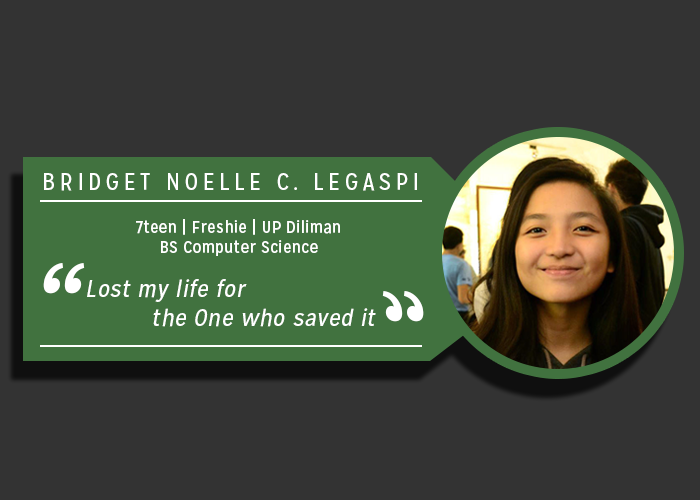
<style>
.page{position:relative;width:700px;height:500px;background:#333333}
.page>*{position:absolute;margin:0}
.t1{font:24.1px "MissionGothic-Regular";letter-spacing:0.18em;color:#ffffff;font-variant:small-caps}
.t2{font:17.2px "MissionGothic-Regular";letter-spacing:0.025em;color:#ffffff}
.t3{font:156.8px "MissionGothic-Regular";letter-spacing:0.025em;color:#ffffff;font-style:italic}
.t4{font:23.9px "MissionGothic-Regular";letter-spacing:0.025em;color:#ffffff;font-style:italic}
</style>
<div class="page">
<p class="t1" style="left:44px;top:173px;width:373px;height:18px">BRIDGET NOELLE C. LEGASPI</p>
<p class="t2" style="left:136px;top:219px;width:204px;height:37px;text-align:center">7teen | Freshie | UP Diliman<br>BS Computer Science</p>
<p class="t3" style="left:43px;top:263px;width:42px;height:31px">“</p>
<p class="t4" style="left:87px;top:279px;width:289px;height:48px">Lost my life for <br>  the One who saved it</p>
<p class="t3" style="left:382px;top:291px;width:42px;height:31px;rotate:180deg">“</p>
</div>
